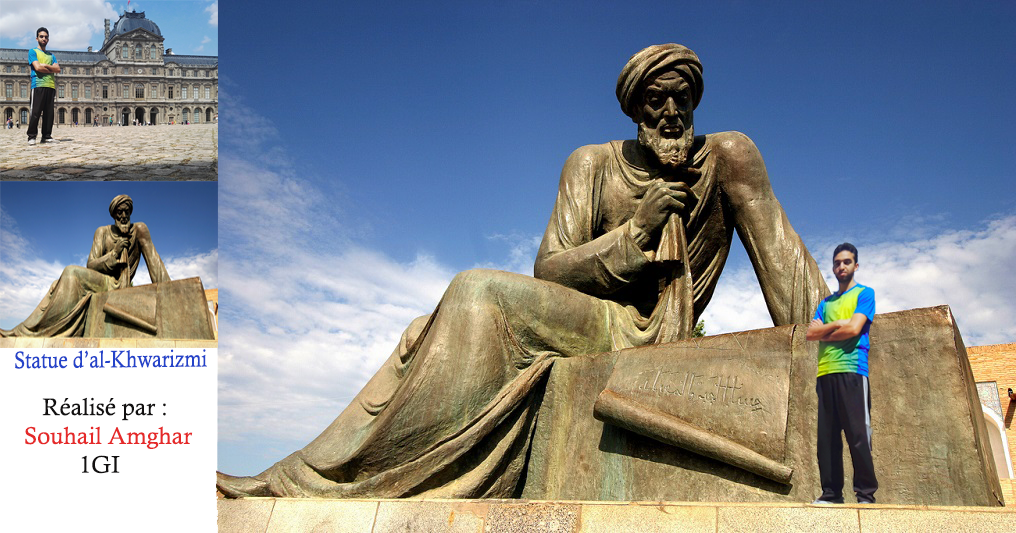
<style>
.page{position:relative;width:1016px;height:533px}
.page>*{position:absolute;margin:0}
.t1{font:24px "CalistoMT";color:#2443c9;scale:0.84 1}
.t2{font:24px "CalistoMT";color:#e52929}
.t3{font:24px "CalistoMT";color:#121010}
</style>
<div class="page">
<p class="t1" style="left:15px;top:349px;width:192px;height:20px;rotate:-1deg">Statue d’al-Khwarizmi</p>
<p class="t2" style="left:25px;top:397px;width:168px;height:77px"><span class="t3">   Réalisé par :<br></span>Souhail Amghar<br><span class="t3">         1GI</span></p>
</div>
